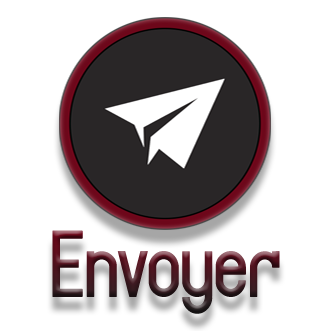
<style>
.page{position:relative;width:331px;height:331px;background:#ffffff}
.page>*{position:absolute;margin:0}
.t1{font:83.3px "Targa";scale:0.9 1}
</style>
<div class="page">
<p class="t1" style="left:52px;top:230px;width:228px;height:84px">Envoyer</p>
</div>
